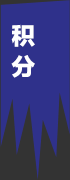
<style>
.page{position:relative;width:70px;height:180px;background:#2f318b}
.page>*{position:absolute;margin:0}
.t1{font:24px/33.2px "FZLTTHK--GBK1-0";color:#ffffff}
</style>
<div class="page">
<p class="t1" style="left:11px;top:24px;width:24px;height:54px">积 分</p>
</div>
